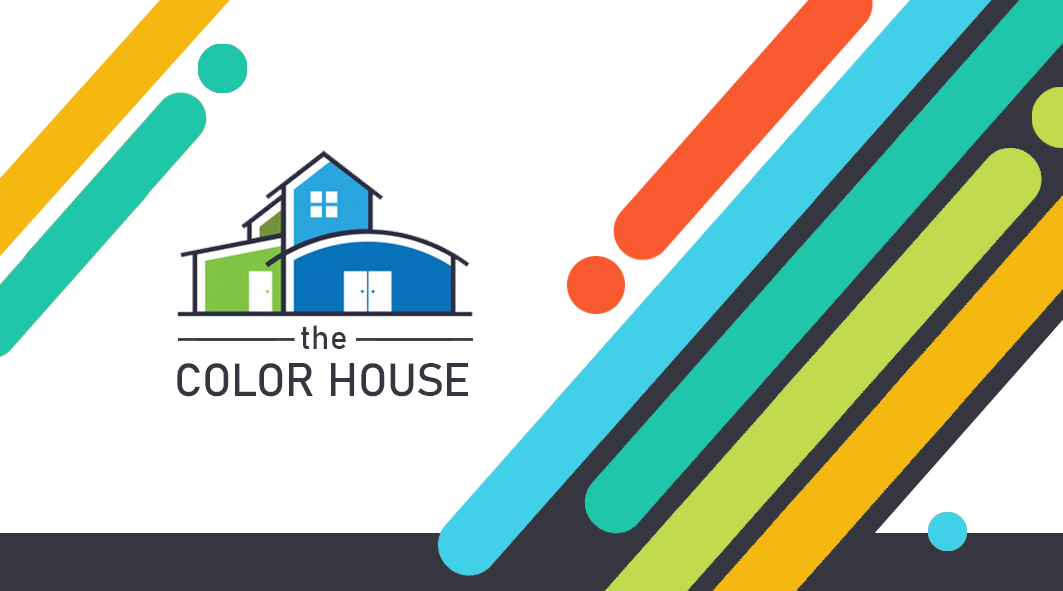
<style>
.page{position:relative;width:1063px;height:591px;background:#ffffff}
.page>*{position:absolute;margin:0}
.t1{font:32.9px "Bahnschrift";color:#363640}
.t2{font:45.7px "Bahnschrift";color:#363640}
</style>
<div class="page">
<p class="t1" style="left:301px;top:325px;width:45px;height:24px">the</p>
<p class="t2" style="left:177px;top:363px;width:291px;height:34px">COLOR HOUSE</p>
</div>
